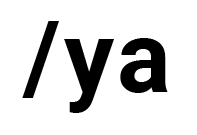
<style>
.page{position:relative;width:197px;height:135px;background:#ffffff}
.page>*{position:absolute;margin:0}
.t1{font:100px "Roboto-Bold";letter-spacing:0.04em;color:#000000}
</style>
<div class="page">
<p class="t1" style="left:22px;top:21px;width:146px;height:92px">/ya</p>
</div>
